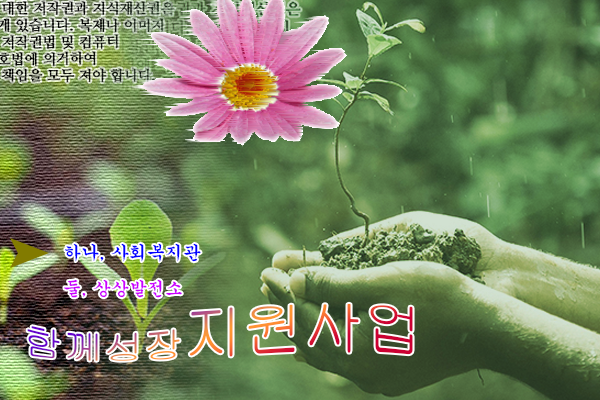
<style>
.page{position:relative;width:600px;height:400px}
.page>*{position:absolute;margin:0}
.t1{font:18px "Gungsuh";color:#0000ff}
.t2{font:18px "Gungsuh";color:#cc00ff}
.t3{font:40px "Gulim"}
.t4{font:60px "Gulim"}
</style>
<div class="page">
<p class="t1" style="left:65px;top:243px;width:136px;height:19px">하나, 사회복지관</p>
<p class="t2" style="left:64px;top:279px;width:118px;height:19px">둘, 상상발전소</p>
<p class="t3" style="left:27px;top:303px;width:386px;height:58px">함께성장<span class="t4">지원사업</span></p>
</div>
